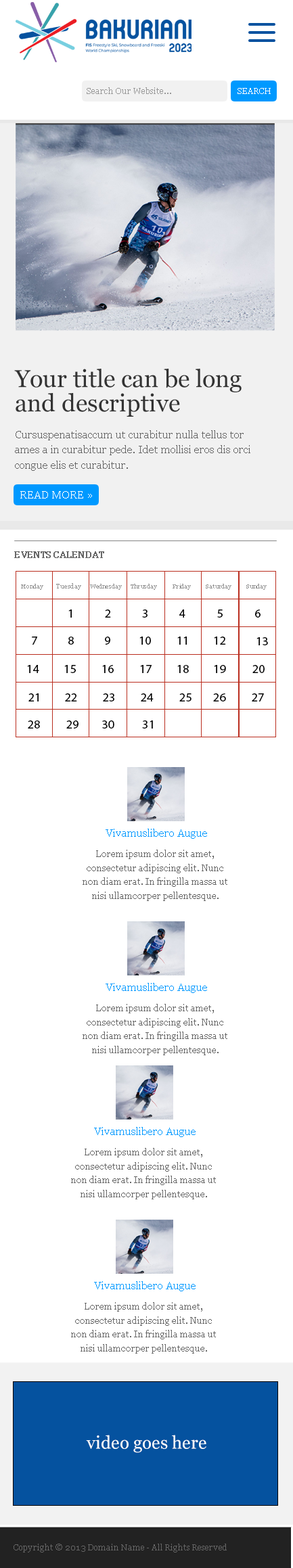
<style>
.page{position:relative;width:293px;height:1568px;background:#ffffff}
.page>*{position:absolute;margin:0}
.t1{font:8.1px "Georgia";color:#999999}
.t2{font:8.1px "Georgia";color:#ffffff}
.t3{font:24.4px/24.4px "Georgia";color:#333333}
.t4{font:10.8px/15.2px "Georgia";color:#666666}
.t5{font:10.8px "Georgia";color:#ffffff}
.t6{font:9.1px "Georgia";color:#666666;text-transform:uppercase;font-weight:bold}
.t7{font:6.2px "Georgia";color:#989898}
.t8{font:6.8px "Georgia";color:#989898}
.t9{font:12.5px "MyriadPro-Regular";color:#000000}
.t10{font:10.8px "Georgia";color:#0099ff}
.t11{font:8.8px/14.1px "Georgia";color:#666666}
.t12{font:17.6px "Georgia";color:#ffffff}
.t13{font:8.1px "Georgia";color:#666666}
</style>
<div class="page">
<p class="t1" style="left:87px;top:87px;width:84px;height:7px">Search Our Website...</p>
<p class="t2" style="left:237px;top:88px;width:34px;height:6px">SEARCH</p>
<p class="t3" style="left:14px;top:369px;width:227px;height:48px">Your title can be long and descriptive</p>
<p class="t4" style="left:15px;top:430px;width:235px;height:41px">Cursuspenatisaccum ut curabitur nulla tellus tor ames a in curabitur pede. Idet mollisi eros dis orci congue elis et curabitur.</p>
<p class="t5" style="left:20px;top:491px;width:72px;height:8px">READ MORE »</p>
<p class="t6" style="left:14px;top:551px;width:90px;height:7px">Events calendat</p>
<p class="t7" style="left:21px;top:584px;width:22px;height:6px">Monday</p>
<p class="t8" style="left:56px;top:583px;width:25px;height:7px">Tuesday</p>
<p class="t7" style="left:90px;top:584px;width:32px;height:6px">Wednesday</p>
<p class="t7" style="left:131px;top:584px;width:26px;height:6px">Thrusday</p>
<p class="t7" style="left:172px;top:584px;width:19px;height:6px">Friday</p>
<p class="t7" style="left:206px;top:584px;width:25px;height:6px">Saturday</p>
<p class="t7" style="left:246px;top:584px;width:21px;height:6px">Sunday</p>
<p class="t9" style="left:68px;top:609px;width:4px;height:9px">1</p>
<p class="t9" style="left:105px;top:609px;width:6px;height:9px">2</p>
<p class="t9" style="left:142px;top:609px;width:5px;height:9px">3</p>
<p class="t9" style="left:179px;top:609px;width:6px;height:9px">4</p>
<p class="t9" style="left:217px;top:609px;width:6px;height:9px">5</p>
<p class="t9" style="left:255px;top:609px;width:5px;height:9px">6</p>
<p class="t9" style="left:32px;top:637px;width:5px;height:8px">7</p>
<p class="t9" style="left:68px;top:637px;width:6px;height:8px">8</p>
<p class="t9" style="left:105px;top:637px;width:5px;height:8px">9</p>
<p class="t9" style="left:139px;top:637px;width:12px;height:8px">10</p>
<p class="t9" style="left:177px;top:637px;width:10px;height:8px">11</p>
<p class="t9" style="left:214px;top:637px;width:12px;height:8px">12</p>
<p class="t9" style="left:256px;top:637px;width:12px;height:8px">13</p>
<p class="t9" style="left:27px;top:665px;width:12px;height:8px">14</p>
<p class="t9" style="left:64px;top:665px;width:12px;height:8px">15</p>
<p class="t9" style="left:102px;top:665px;width:12px;height:8px">16</p>
<p class="t9" style="left:140px;top:665px;width:12px;height:8px">17</p>
<p class="t9" style="left:177px;top:665px;width:12px;height:8px">18</p>
<p class="t9" style="left:214px;top:665px;width:12px;height:8px">19</p>
<p class="t9" style="left:252px;top:665px;width:12px;height:8px">20</p>
<p class="t9" style="left:28px;top:693px;width:11px;height:8px">21</p>
<p class="t9" style="left:65px;top:693px;width:12px;height:8px">22</p>
<p class="t9" style="left:103px;top:693px;width:11px;height:8px">23</p>
<p class="t9" style="left:141px;top:693px;width:13px;height:8px">24</p>
<p class="t9" style="left:179px;top:693px;width:12px;height:8px">25</p>
<p class="t9" style="left:213px;top:693px;width:13px;height:8px">26</p>
<p class="t9" style="left:252px;top:693px;width:12px;height:8px">27</p>
<p class="t9" style="left:28px;top:720px;width:12px;height:9px">28</p>
<p class="t9" style="left:66px;top:720px;width:12px;height:9px">29</p>
<p class="t9" style="left:102px;top:720px;width:12px;height:9px">30</p>
<p class="t9" style="left:142px;top:720px;width:11px;height:9px">31</p>
<p class="t10" style="left:106px;top:829px;width:101px;height:10px">Vivamuslibero Augue</p>
<p class="t11" style="left:83px;top:850px;width:144px;height:51px;text-align:center">Lorem ipsum dolor sit amet, consectetur adipiscing elit. Nunc non diam erat. In fringilla massa ut nisi ullamcorper pellentesque.</p>
<p class="t10" style="left:106px;top:983px;width:101px;height:10px">Vivamuslibero Augue</p>
<p class="t11" style="left:83px;top:1004px;width:144px;height:51px;text-align:center">Lorem ipsum dolor sit amet, consectetur adipiscing elit. Nunc non diam erat. In fringilla massa ut nisi ullamcorper pellentesque.</p>
<p class="t10" style="left:94px;top:1127px;width:101px;height:10px">Vivamuslibero Augue</p>
<p class="t11" style="left:71px;top:1148px;width:145px;height:51px;text-align:center">Lorem ipsum dolor sit amet, consectetur adipiscing elit. Nunc non diam erat. In fringilla massa ut nisi ullamcorper pellentesque.</p>
<p class="t10" style="left:94px;top:1281px;width:101px;height:10px">Vivamuslibero Augue</p>
<p class="t11" style="left:71px;top:1302px;width:145px;height:52px;text-align:center">Lorem ipsum dolor sit amet, consectetur adipiscing elit. Nunc non diam erat. In fringilla massa ut nisi ullamcorper pellentesque.</p>
<p class="t12" style="left:86px;top:1435px;width:120px;height:18px">video goes here</p>
<p class="t13" style="left:14px;top:1544px;width:213px;height:8px">Copyright © 2013 Domain Name - All Rights Reserved</p>
</div>
